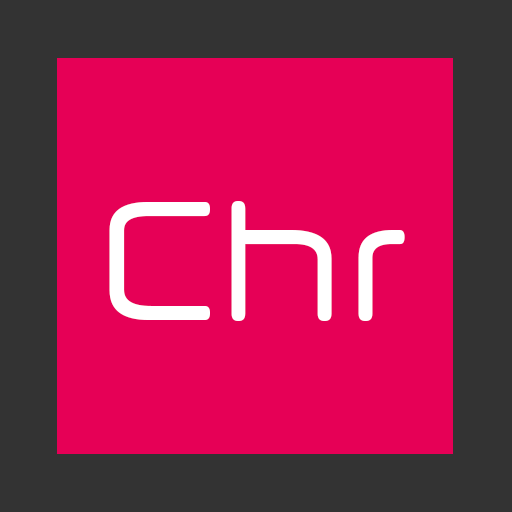
<style>
.page{position:relative;width:512px;height:512px;background:#e60056}
.page>*{position:absolute;margin:0}
.t1{font:169px "NeuropolXFree";color:#ffffff;scale:0.83 1}
</style>
<div class="page">
<p class="t1" style="left:109px;top:201px;width:296px;height:120px">Chr</p>
</div>
